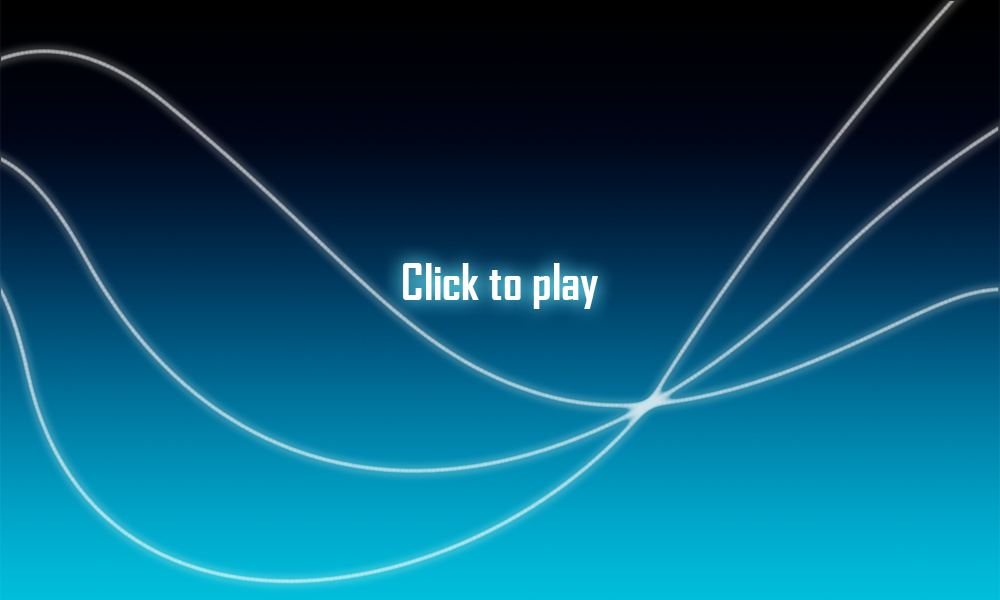
<style>
.page{position:relative;width:1000px;height:600px}
.page>*{position:absolute;margin:0}
.t1{font:48px "AgencyFB-Bold";color:#ffffff}
</style>
<div class="page">
<p class="t1" style="left:403px;top:263px;width:195px;height:46px">Click to play</p>
</div>
